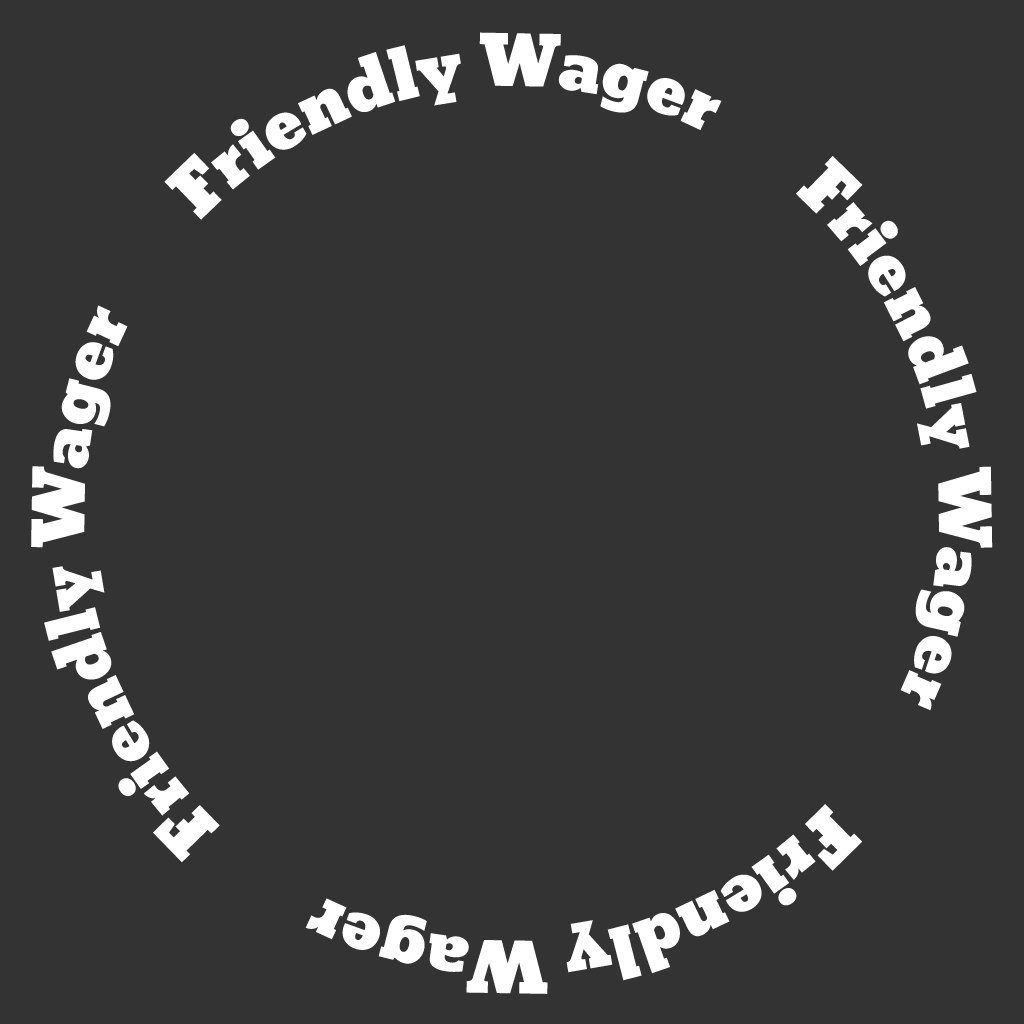
<style>
.page{position:relative;width:1024px;height:1024px;background:#333333}
.page>*{position:absolute;margin:0}
.t1{font:66.7px "Bevan";letter-spacing:-0.01em;color:#ffffff}
</style>
<div class="page">
<p class="t1" style="left:31px;top:32px;width:962px;height:962px;text-align:center">Friendly Wager        Friendly Wager        Friendly Wager       Friendly Wager</p>
</div>
